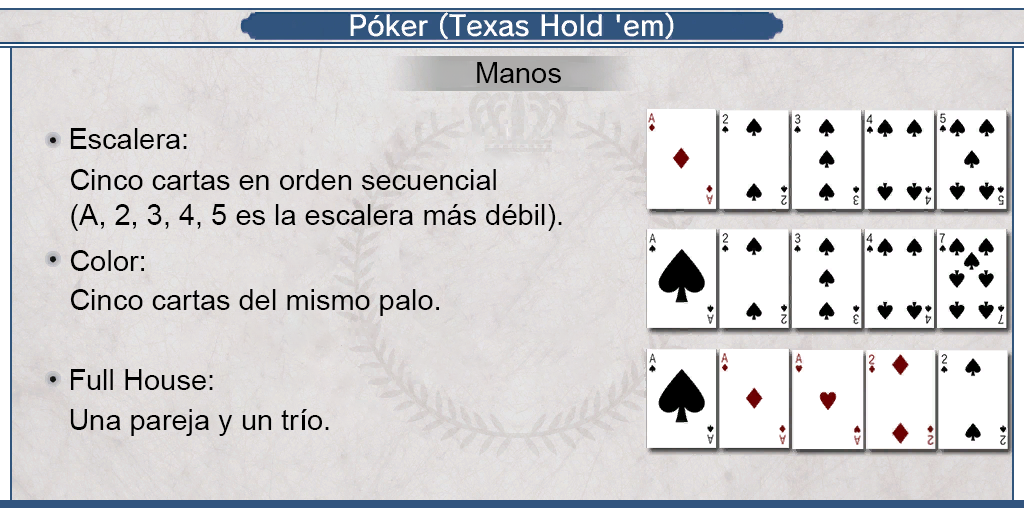
<style>
.page{position:relative;width:1024px;height:512px;background:#ffffff}
.page>*{position:absolute;margin:0}
.t1{font:29px "ArialMT";color:#000000}
</style>
<div class="page">
<p class="t1" style="left:477px;top:62px;width:84px;height:21px">Manos</p>
<p class="t1" style="left:70px;top:128px;width:117px;height:21px">Escalera:</p>
<p class="t1" style="left:70px;top:169px;width:492px;height:62px">Cinco cartas en orden secuencial<br>(A, 2, 3, 4, 5 es la escalera más débil).</p>
<p class="t1" style="left:70px;top:250px;width:74px;height:21px">Color:</p>
<p class="t1" style="left:70px;top:289px;width:369px;height:27px">Cinco cartas del mismo palo.</p>
<p class="t1" style="left:71px;top:369px;width:142px;height:21px">Full House:</p>
<p class="t1" style="left:70px;top:409px;width:259px;height:27px">Una pareja y un trío.</p>
</div>
